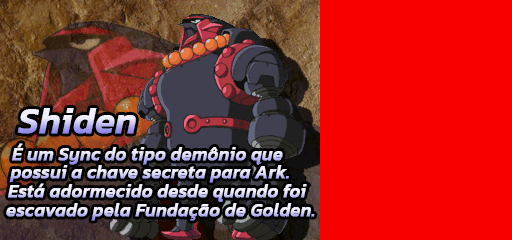
<style>
.page{position:relative;width:512px;height:240px;background:#f80000}
.page>*{position:absolute;margin:0}
.t1{font:36px "Kanit-MediumItalic";font-weight:bold}
.t2{font:18px "Kanit-MediumItalic";font-weight:bold}
</style>
<div class="page">
<p class="t1" style="left:17px;top:108px;width:119px;height:26px">Shiden</p>
<p class="t2" style="left:12px;top:143px;width:271px;height:22px">É um Sync do tipo demônio que</p>
<p class="t2" style="left:9px;top:165px;width:280px;height:18px">possui a chave secreta para Ark.</p>
<p class="t2" style="left:8px;top:183px;width:299px;height:19px">Está adormecido desde quando foi</p>
<p class="t2" style="left:6px;top:203px;width:309px;height:18px">escavado pela Fundação de Golden.</p>
</div>
